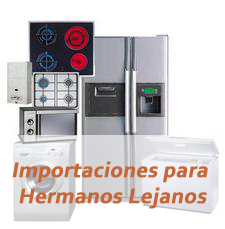
<style>
.page{position:relative;width:225px;height:229px;background:#ffffff}
.page>*{position:absolute;margin:0}
.t1{font:22px "Corbel-Bold";letter-spacing:0.005em;color:#c66738;font-weight:bold;font-style:italic}
</style>
<div class="page">
<p class="t1" style="left:12px;top:161px;width:196px;height:48px;text-align:center">Importaciones para <br>Hermanos Lejanos</p>
</div>
